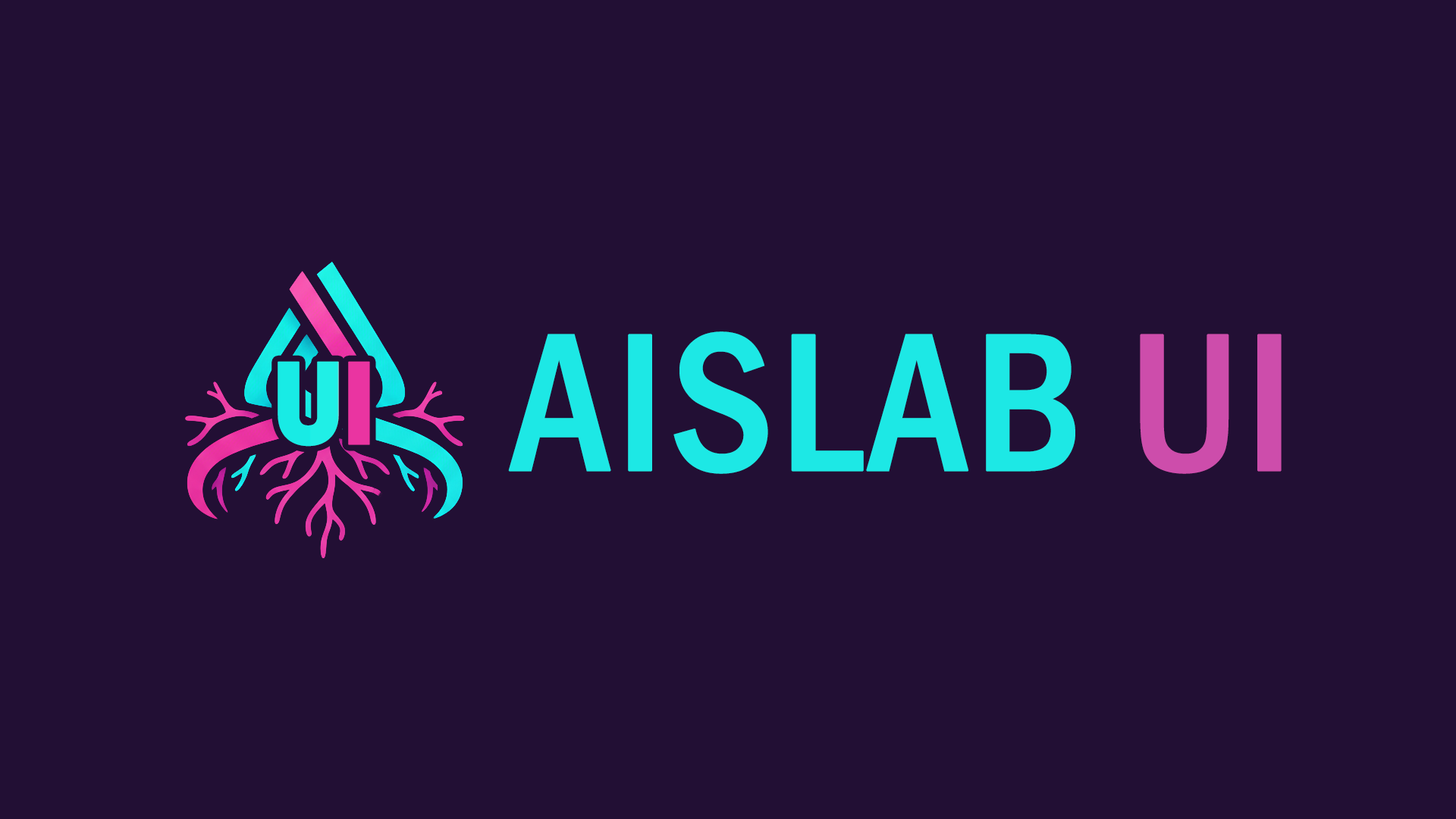
<style>
.page{position:relative;width:1456px;height:819px;background:#220f34}
.page>*{position:absolute;margin:0}
.t1{font:203.2px "FranklinGothic-MediumCond";color:#1de8e5;text-transform:uppercase;font-weight:bold}
.t2{font:203.2px "FranklinGothic-MediumCond";color:#cd4dab;text-transform:uppercase;font-weight:bold}
.t3{font:117.5px "BauhausLT-Bold";letter-spacing:-0.04em;color:#1de8e5;text-transform:uppercase;font-weight:bold}
</style>
<div class="page">
<p class="t1" style="left:508px;top:331px;width:567px;height:143px">AISLAB</p>
<p class="t2" style="left:1140px;top:334px;width:142px;height:140px">ui</p>
<p class="t3" style="left:278px;top:361px;width:92px;height:86px">UI</p>
</div>
